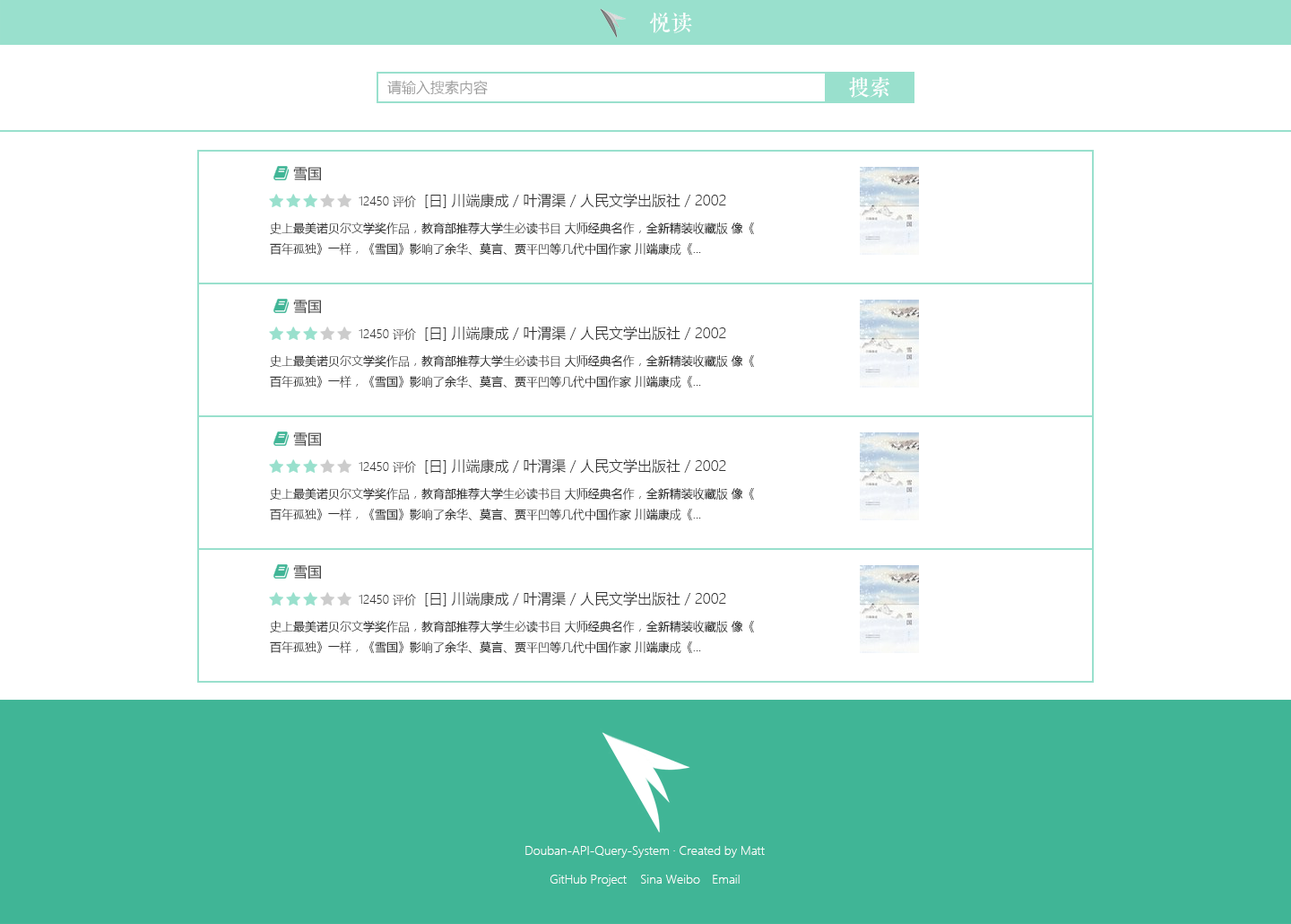
<style>
.page{position:relative;width:1291px;height:924px;background:#ffffff}
.page>*{position:absolute;margin:0}
.t1{font:21.5px "FZQKBYSJW--GB1-0";color:#ffffff}
.t2{font:14.3px "MicrosoftYaHeiLight";color:#999999}
.t3{font:14.3px "MicrosoftYaHeiLight";color:#333333}
.t4{font:11.7px "MicrosoftYaHeiLight";color:#333333}
.t5{font:11.7px "MicrosoftYaHeiLight";color:#ffffff}
</style>
<div class="page">
<p class="t1" style="left:650px;top:13px;width:42px;height:20px">悦读</p>
<p class="t1" style="left:849px;top:76px;width:40px;height:22px">搜索</p>
<p class="t2" style="left:387px;top:80px;width:101px;height:15px">请输入搜索内容</p>
<p class="t3" style="left:293px;top:167px;width:28px;height:14px">雪国</p>
<p class="t4" style="left:359px;top:195px;width:57px;height:12px">12450 评价</p>
<p class="t3" style="left:425px;top:193px;width:301px;height:15px">[日] 川端康成 / 叶渭渠 / 人民文学出版社 / 2002</p>
<p class="t4" style="left:270px;top:222px;width:484px;height:33px">史上最美诺贝尔文学奖作品，教育部推荐大学生必读书目 大师经典名作，全新精装收藏版 像《百年孤独》一样，《雪国》影响了余华、莫言、贾平凹等几代中国作家 川端康成《...</p>
<p class="t3" style="left:293px;top:299px;width:28px;height:15px">雪国</p>
<p class="t4" style="left:359px;top:328px;width:57px;height:12px">12450 评价</p>
<p class="t3" style="left:425px;top:325px;width:301px;height:16px">[日] 川端康成 / 叶渭渠 / 人民文学出版社 / 2002</p>
<p class="t4" style="left:270px;top:355px;width:484px;height:32px">史上最美诺贝尔文学奖作品，教育部推荐大学生必读书目 大师经典名作，全新精装收藏版 像《百年孤独》一样，《雪国》影响了余华、莫言、贾平凹等几代中国作家 川端康成《...</p>
<p class="t3" style="left:293px;top:432px;width:28px;height:15px">雪国</p>
<p class="t4" style="left:359px;top:461px;width:57px;height:12px">12450 评价</p>
<p class="t3" style="left:425px;top:458px;width:301px;height:15px">[日] 川端康成 / 叶渭渠 / 人民文学出版社 / 2002</p>
<p class="t4" style="left:270px;top:488px;width:484px;height:32px">史上最美诺贝尔文学奖作品，教育部推荐大学生必读书目 大师经典名作，全新精装收藏版 像《百年孤独》一样，《雪国》影响了余华、莫言、贾平凹等几代中国作家 川端康成《...</p>
<p class="t3" style="left:293px;top:565px;width:28px;height:14px">雪国</p>
<p class="t4" style="left:359px;top:594px;width:57px;height:11px">12450 评价</p>
<p class="t3" style="left:425px;top:591px;width:301px;height:15px">[日] 川端康成 / 叶渭渠 / 人民文学出版社 / 2002</p>
<p class="t4" style="left:270px;top:620px;width:484px;height:33px">史上最美诺贝尔文学奖作品，教育部推荐大学生必读书目 大师经典名作，全新精装收藏版 像《百年孤独》一样，《雪国》影响了余华、莫言、贾平凹等几代中国作家 川端康成《...</p>
<p class="t5" style="left:525px;top:846px;width:240px;height:11px">Douban-API-Query-System · Created by Matt</p>
<p class="t5" style="left:550px;top:874px;width:77px;height:12px">GitHub Project</p>
<p class="t5" style="left:641px;top:874px;width:59px;height:9px">Sina Weibo</p>
<p class="t5" style="left:713px;top:874px;width:27px;height:9px">Email</p>
</div>
